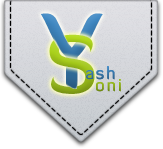
<style>
.page{position:relative;width:163px;height:149px;background:#ffffff}
.page>*{position:absolute;margin:0}
.t1{font:104.3px "DiavloMedium-Regular";letter-spacing:0.1em}
.t2{font:80.8px "DiavloMedium-Regular";letter-spacing:0.1em}
.t3{font:17.1px "DiavloMedium-Regular";letter-spacing:0.1em;color:#3472a3}
.t4{font:17.1px "DiavloMedium-Regular";letter-spacing:0.1em;color:#89a616}
</style>
<div class="page">
<p class="t1" style="left:41px;top:13px;width:62px;height:76px">Y</p>
<p class="t1" style="left:41px;top:13px;width:62px;height:76px">Y</p>
<p class="t2" style="left:49px;top:34px;width:46px;height:60px">S</p>
<p class="t3" style="left:86px;top:66px;width:29px;height:14px">ash</p>
<p class="t3" style="left:86px;top:66px;width:29px;height:14px">ash</p>
<p class="t4" style="left:96px;top:79px;width:25px;height:13px">oni</p>
<p class="t4" style="left:96px;top:79px;width:25px;height:13px">oni</p>
</div>
